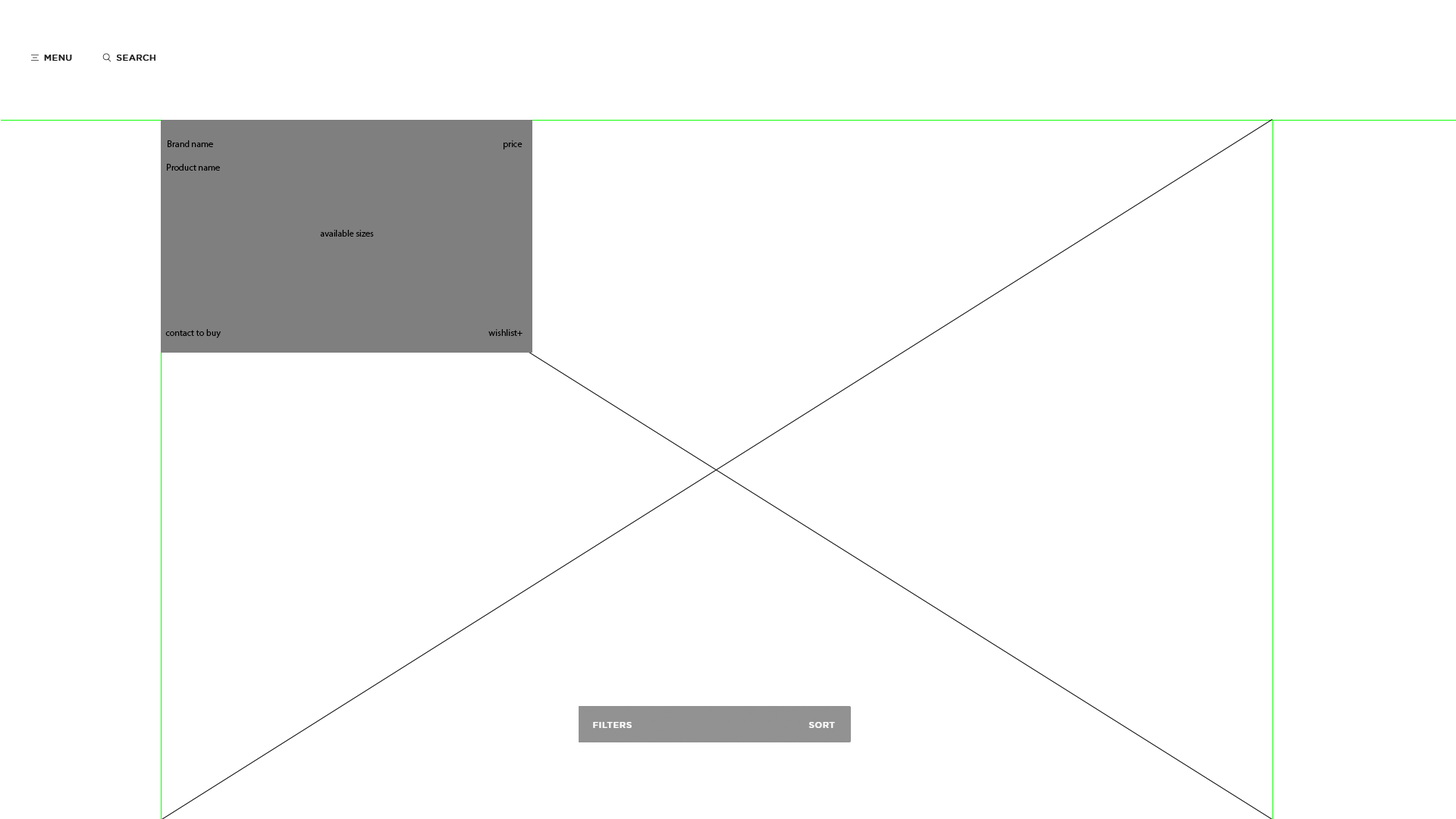
<style>
.page{position:relative;width:1456px;height:819px;background:#ffffff}
.page>*{position:absolute;margin:0}
.t1{font:9.1px "MyriadPro-Regular";color:#000000}
</style>
<div class="page">
<p class="t1" style="left:168px;top:140px;width:45px;height:7px">Brand name</p>
<p class="t1" style="left:504px;top:140px;width:18px;height:9px">price</p>
<p class="t1" style="left:167px;top:164px;width:53px;height:7px">Product name</p>
<p class="t1" style="left:320px;top:230px;width:54px;height:7px">available sizes</p>
<p class="t1" style="left:165px;top:329px;width:56px;height:9px">contact to buy</p>
<p class="t1" style="left:488px;top:329px;width:34px;height:7px">wishlist+</p>
</div>
